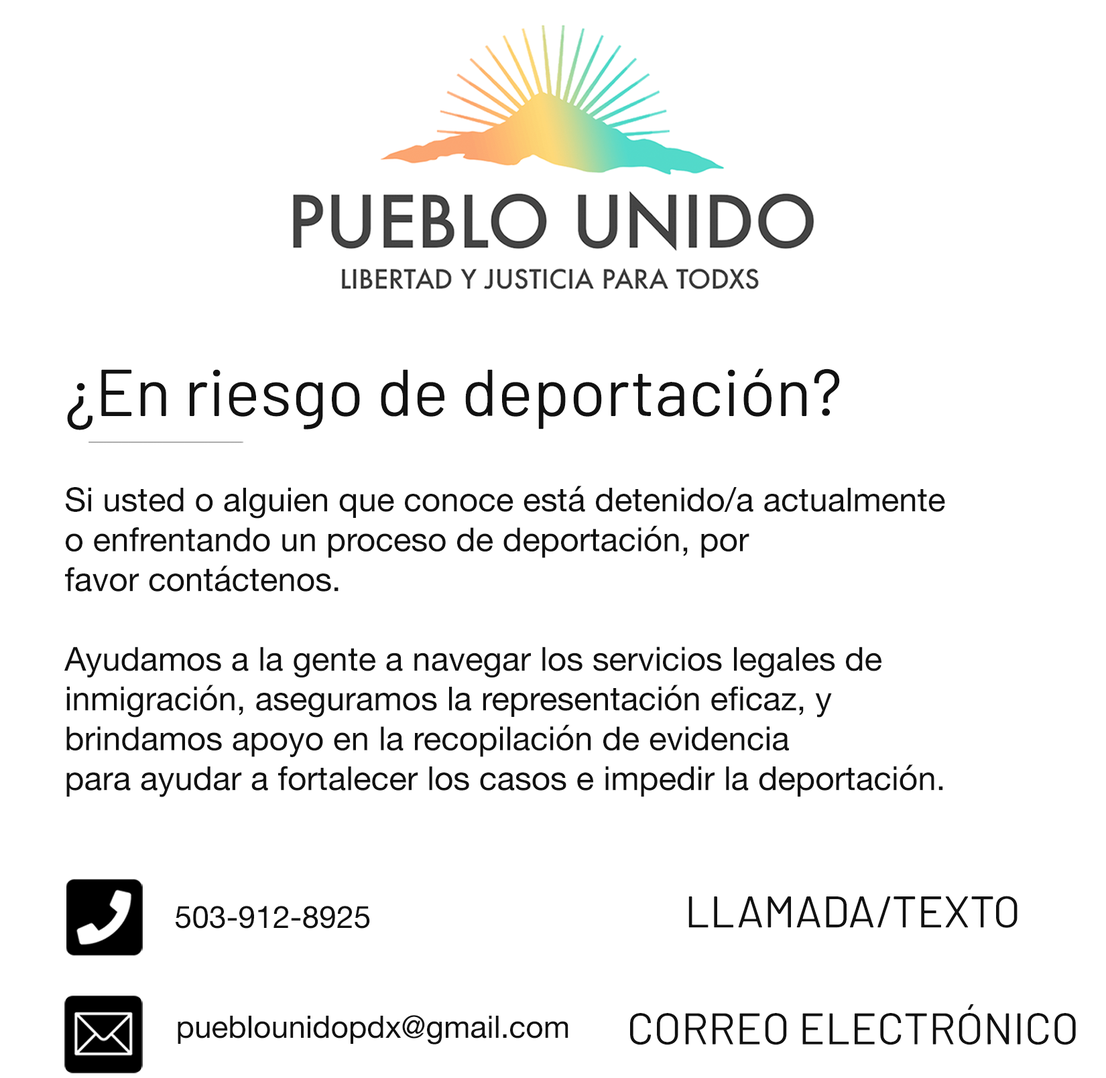
<style>
.page{position:relative;width:1106px;height:1078px;background:#ffffff}
.page>*{position:absolute;margin:0}
.t1{font:66.4px "Barlow-Regular";color:#111111}
.t2{font:33.2px "HelveticaNeue";color:#111111}
.t3{font:44.2px "Barlow-Regular";color:#111111}
.t4{font:31px "HelveticaNeue";color:#111111}
</style>
<div class="page">
<p class="t1" style="left:67px;top:369px;width:773px;height:61px">¿En riesgo de deportación?</p>
<p class="t2" style="left:64px;top:486px;width:881px;height:312px">Si usted o alguien que conoce está detenido/a actualmente <br>o enfrentando un proceso de deportación, por <br>favor contáctenos.<br><br>Ayudamos a la gente a navegar los servicios legales de <br>inmigración, aseguramos la representación eficaz, y <br>brindamos apoyo en la recopilación de evidencia <br>para ayudar a fortalecer los casos e impedir la deportación.</p>
<p class="t3" style="left:688px;top:896px;width:329px;height:32px">LLAMADA/TEXTO</p>
<p class="t4" style="left:176px;top:906px;width:194px;height:23px">503-912-8925</p>
<p class="t3" style="left:630px;top:1004px;width:446px;height:41px">CORREO ELECTR̓ÓNICO</p>
<p class="t4" style="left:178px;top:1015px;width:390px;height:30px">pueblounidopdx@gmail.com</p>
</div>
